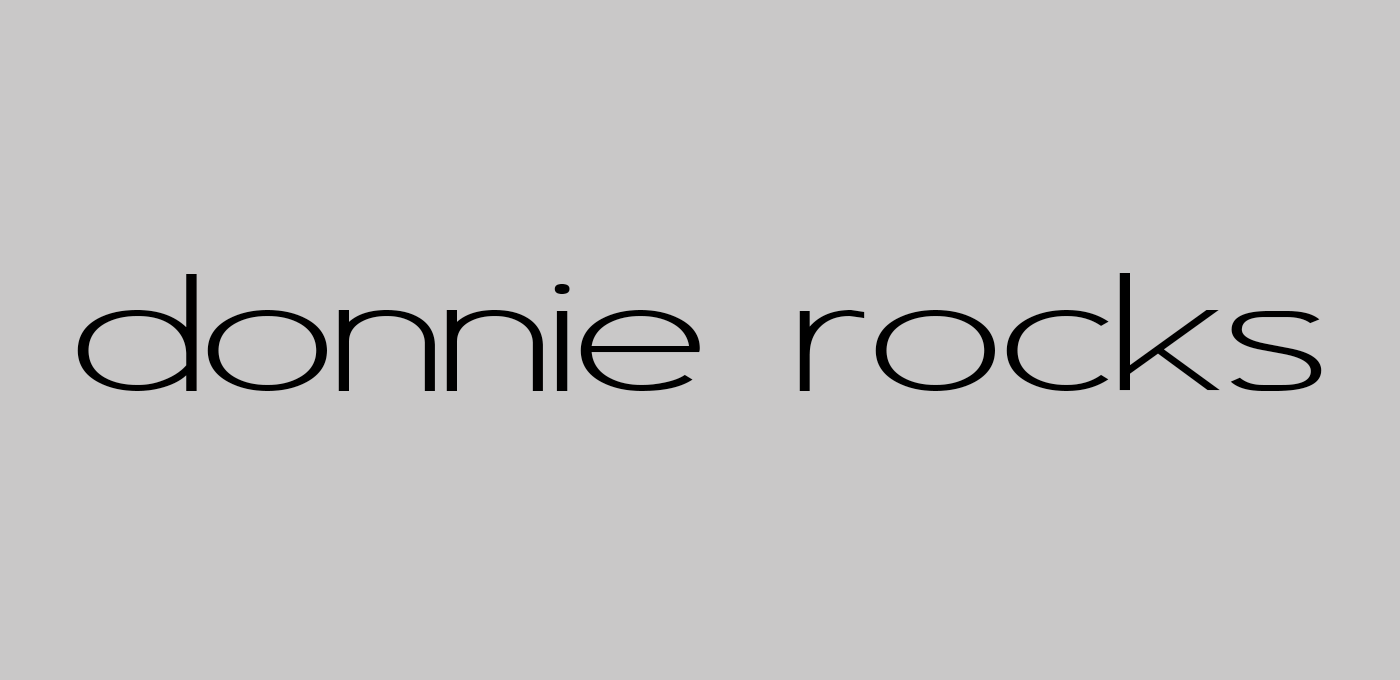
<style>
.page{position:relative;width:1400px;height:680px;background:#c9c8c8}
.page>*{position:absolute;margin:0}
.t1{font:200px "AsenineWide";color:#000000}
</style>
<div class="page">
<p class="t1" style="left:77px;top:273px;width:1245px;height:118px">donnie rocks</p>
</div>
